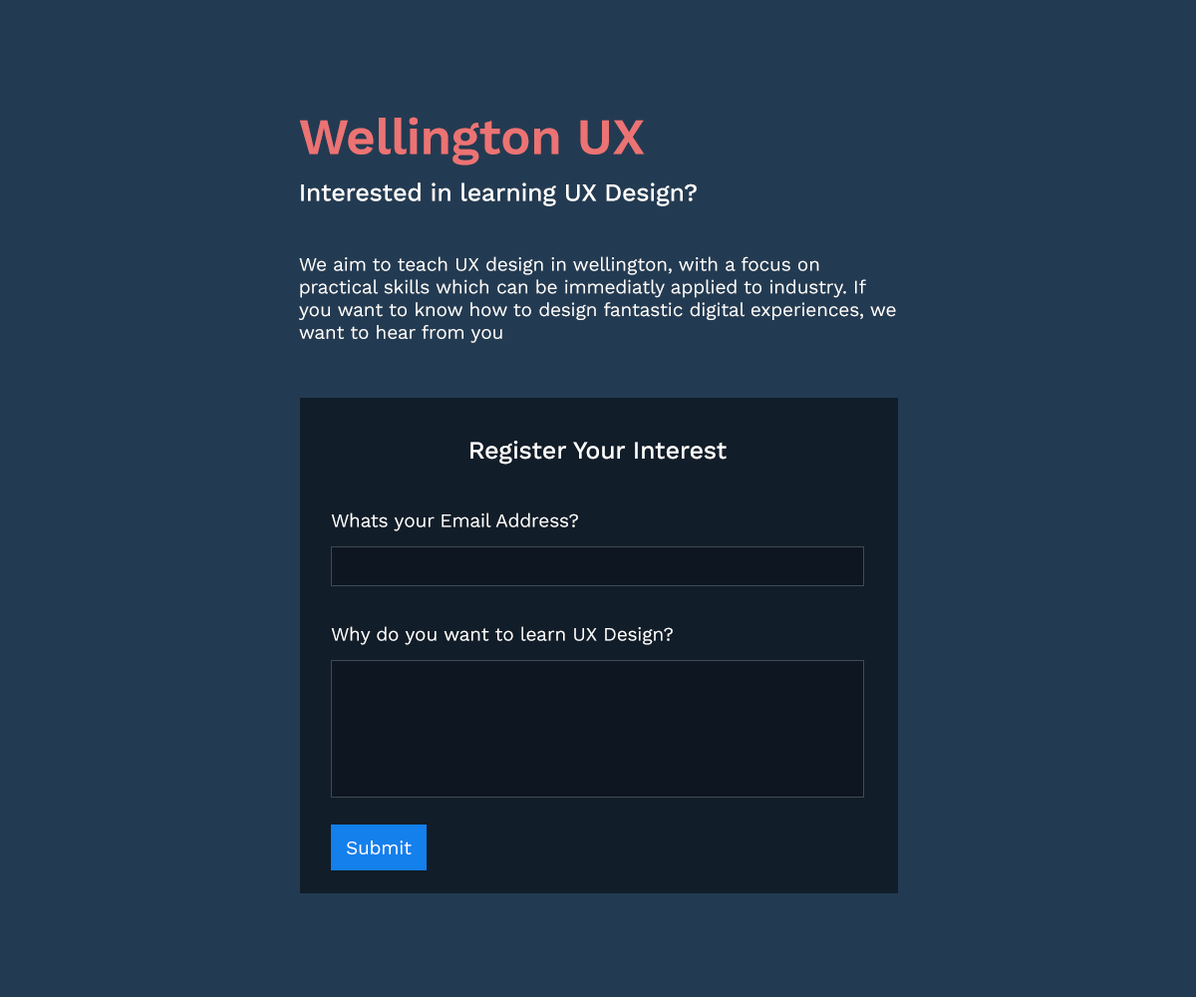
<style>
.page{position:relative;width:1196px;height:997px;background:#233b52}
.page>*{position:absolute;margin:0}
.t1{font:18.9px "WorkSans-Regular";letter-spacing:-0.01em;color:#ffffff}
.t2{font:50.8px/46.9px "WorkSans-SemiBold";letter-spacing:-0.01em;color:#ec7373}
.t3{font:24.9px/46.9px "WorkSans-Medium";letter-spacing:-0.01em;color:#ffffff}
</style>
<div class="page">
<p class="t1" style="left:299px;top:117px;width:597px;height:226px"><span class="t2">Wellington UX<br></span><span class="t3">Interested in learning UX Design?<br><br></span>We aim to teach UX design in wellington, with a focus on practical skills which can be immediatly applied to industry. If you want to know how to design fantastic digital experiences, we want to hear from you</p>
<p class="t1" style="left:331px;top:441px;width:396px;height:204px;text-align:center"><span class="t3">Register Your Interest<br></span><br><br>Whats your Email Address?<br><br><br><br><br>Why do you want to learn UX Design?</p>
<p class="t1" style="left:347px;top:840px;width:65px;height:14px">Submit</p>
</div>
